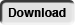
<style>
.page{position:relative;width:75px;height:25px;background:#e2e2e2}
.page>*{position:absolute;margin:0}
.t1{font:12px "Helvetica-Bold";color:#000000}
.t2{font:13px "Helvetica-Bold";color:#000000}
</style>
<div class="page">
<p class="t1" style="left:8px;top:8px;width:58px;height:9px">Do<span class="t2">w</span>nload</p>
</div>
